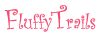
<style>
.page{position:relative;width:100px;height:38px;background:#ffffff}
.page>*{position:absolute;margin:0}
.t1{font:20.2px "CurlzMT";color:#f44d74}
.t2{font:29.7px "CurlzMT";color:#f44d74}
</style>
<div class="page">
<p class="t1" style="left:4px;top:5px;width:92px;height:27px"><span class="t2">F</span>luffy<span class="t2">T</span>rails</p>
</div>
